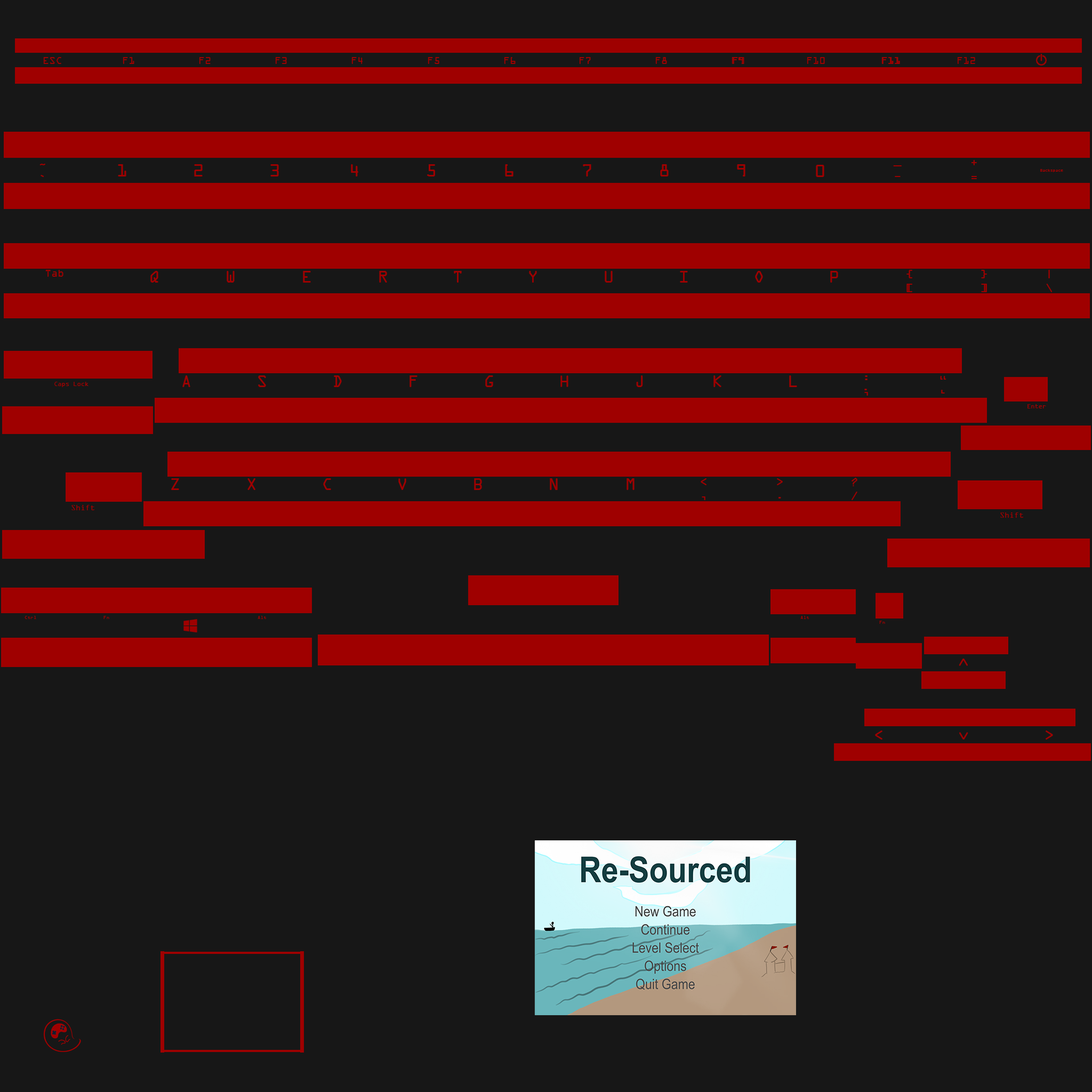
<style>
.page{position:relative;width:1092px;height:1092px;background:#171717}
.page>*{position:absolute;margin:0}
.t1{font:10.7px "OCRAExtended";color:#9f0000}
.t2{font:13px "OCRAExtended";color:#9f0000}
.t3{font:19.3px "OCRAExtended";color:#9f0000}
.t4{font:4.3px "OCRAExtended";color:#9f0000}
.t5{font:13.3px/13.9px "OCRAExtended";letter-spacing:-0.2em;color:#9f0000}
.t6{font:18.1px "OCRAExtended";color:#9f0000}
.t7{font:6.4px "OCRAExtended";color:#9f0000}
.t8{font:7.9px "OCRAExtended";color:#9f0000}
.t9{font:5px "OCRAExtended";color:#9f0000}
.t10{font:16.9px "OCRAExtended";letter-spacing:-0.2em;color:#9f0000}
</style>
<div class="page">
<p class="t1" style="left:43px;top:57px;width:18px;height:7px">ESC</p>
<p class="t1" style="left:123px;top:57px;width:11px;height:7px">F1</p>
<p class="t1" style="left:199px;top:57px;width:12px;height:7px">F2</p>
<p class="t1" style="left:275px;top:57px;width:12px;height:7px">F3</p>
<p class="t1" style="left:351px;top:57px;width:12px;height:7px">F4</p>
<p class="t1" style="left:428px;top:57px;width:11px;height:7px">F5</p>
<p class="t1" style="left:504px;top:57px;width:12px;height:7px">F6</p>
<p class="t1" style="left:579px;top:57px;width:12px;height:7px">F7</p>
<p class="t1" style="left:655px;top:57px;width:12px;height:7px">F8</p>
<p class="t1" style="left:732px;top:57px;width:11px;height:7px">F9</p>
<p class="t1" style="left:733px;top:57px;width:11px;height:7px">F9</p>
<p class="t1" style="left:807px;top:57px;width:18px;height:7px">F10</p>
<p class="t1" style="left:881px;top:57px;width:19px;height:7px">F11</p>
<p class="t1" style="left:882px;top:57px;width:18px;height:7px">F11</p>
<p class="t1" style="left:957px;top:57px;width:18px;height:7px">F12</p>
<p class="t2" style="left:971px;top:160px;width:6px;height:19px">+<br>=</p>
<p class="t2" style="left:39px;top:164px;width:6px;height:13px">~<br>`</p>
<p class="t3" style="left:118px;top:164px;width:8px;height:12px">1</p>
<p class="t3" style="left:194px;top:164px;width:9px;height:12px">2</p>
<p class="t3" style="left:270px;top:164px;width:9px;height:12px">3</p>
<p class="t3" style="left:351px;top:164px;width:7px;height:12px">4</p>
<p class="t3" style="left:427px;top:164px;width:8px;height:12px">5</p>
<p class="t3" style="left:505px;top:164px;width:8px;height:12px">6</p>
<p class="t3" style="left:583px;top:164px;width:8px;height:12px">7</p>
<p class="t3" style="left:660px;top:164px;width:9px;height:12px">8</p>
<p class="t3" style="left:737px;top:164px;width:8px;height:12px">9</p>
<p class="t3" style="left:816px;top:165px;width:8px;height:12px">0</p>
<p class="t2" style="left:893px;top:165px;width:9px;height:12px">_<br>-</p>
<p class="t4" style="left:1040px;top:169px;width:23px;height:3px">Backspace</p>
<p class="t1" style="left:45px;top:270px;width:18px;height:7px">Tab</p>
<p class="t5" style="left:906px;top:270px;width:6px;height:22px">{<br>[</p>
<p class="t5" style="left:981px;top:270px;width:6px;height:22px">}<br>]</p>
<p class="t5" style="left:1046px;top:270px;width:6px;height:22px">|<br>\</p>
<p class="t6" style="left:150px;top:271px;width:8px;height:12px">Q</p>
<p class="t6" style="left:227px;top:271px;width:8px;height:12px">W</p>
<p class="t6" style="left:303px;top:271px;width:8px;height:12px">E</p>
<p class="t6" style="left:379px;top:271px;width:8px;height:12px">R</p>
<p class="t6" style="left:454px;top:271px;width:8px;height:12px">T</p>
<p class="t6" style="left:529px;top:271px;width:8px;height:12px">Y</p>
<p class="t6" style="left:605px;top:271px;width:8px;height:12px">U</p>
<p class="t6" style="left:680px;top:271px;width:8px;height:12px">I</p>
<p class="t6" style="left:755px;top:271px;width:8px;height:12px">O</p>
<p class="t6" style="left:830px;top:271px;width:8px;height:12px">P</p>
<p class="t6" style="left:182px;top:375px;width:8px;height:12px">A</p>
<p class="t6" style="left:258px;top:375px;width:8px;height:12px">S</p>
<p class="t6" style="left:334px;top:375px;width:8px;height:12px">D</p>
<p class="t6" style="left:409px;top:375px;width:8px;height:12px">F</p>
<p class="t6" style="left:485px;top:375px;width:8px;height:12px">G</p>
<p class="t6" style="left:560px;top:375px;width:8px;height:12px">H</p>
<p class="t6" style="left:636px;top:375px;width:7px;height:12px">J</p>
<p class="t6" style="left:713px;top:375px;width:8px;height:12px">K</p>
<p class="t6" style="left:789px;top:375px;width:8px;height:12px">L</p>
<p class="t5" style="left:864px;top:375px;width:4px;height:21px">:<br>;</p>
<p class="t5" style="left:940px;top:376px;width:6px;height:17px">“<br>‘</p>
<p class="t7" style="left:54px;top:382px;width:35px;height:5px">Caps Lock</p>
<p class="t7" style="left:1027px;top:404px;width:19px;height:4px">Enter</p>
<p class="t6" style="left:171px;top:478px;width:8px;height:12px">Z</p>
<p class="t6" style="left:247px;top:478px;width:8px;height:12px">X</p>
<p class="t6" style="left:323px;top:478px;width:8px;height:12px">C</p>
<p class="t6" style="left:398px;top:478px;width:8px;height:12px">V</p>
<p class="t6" style="left:474px;top:478px;width:8px;height:12px">B</p>
<p class="t6" style="left:550px;top:478px;width:8px;height:12px">N</p>
<p class="t6" style="left:627px;top:478px;width:8px;height:12px">M</p>
<p class="t5" style="left:701px;top:478px;width:5px;height:22px">&lt;<br>,</p>
<p class="t5" style="left:777px;top:478px;width:6px;height:21px">&gt;<br>.</p>
<p class="t5" style="left:852px;top:478px;width:5px;height:22px">?<br>/</p>
<p class="t8" style="left:71px;top:505px;width:23px;height:5px">Shift</p>
<p class="t8" style="left:1000px;top:512px;width:23px;height:6px">Shift</p>
<p class="t9" style="left:25px;top:616px;width:11px;height:3px">Ctrl</p>
<p class="t9" style="left:103px;top:616px;width:6px;height:3px">Fn</p>
<p class="t9" style="left:258px;top:616px;width:8px;height:3px">Alt</p>
<p class="t9" style="left:800px;top:616px;width:9px;height:3px">Alt</p>
<p class="t9" style="left:879px;top:621px;width:6px;height:3px">Fn</p>
<p class="t10" style="left:959px;top:658px;width:9px;height:8px;rotate:-90deg">&gt;</p>
<p class="t10" style="left:875px;top:730px;width:7px;height:10px;rotate:180deg">&gt;</p>
<p class="t10" style="left:959px;top:732px;width:9px;height:8px;rotate:90deg">&gt;</p>
<p class="t10" style="left:1046px;top:730px;width:7px;height:10px">&gt;</p>
</div>
